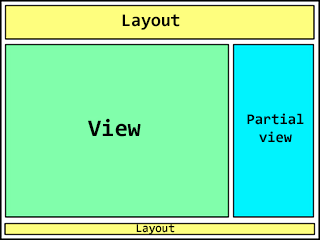
<style>
.page{position:relative;width:320px;height:240px;background:#81feab}
.page>*{position:absolute;margin:0}
.t1{font:18px "Consolas-Bold";color:#000000}
.t2{font:15px "Consolas-Bold";color:#000000}
.t3{font:24px "Consolas-Bold";color:#000000}
.t4{font:12px "Consolas-Bold";color:#000000}
</style>
<div class="page">
<p class="t1" style="left:122px;top:14px;width:58px;height:16px">Layout</p>
<p class="t2" style="left:247px;top:113px;width:57px;height:30px;text-align:center">Partial view</p>
<p class="t3" style="left:88px;top:118px;width:53px;height:19px">View</p>
<p class="t4" style="left:136px;top:224px;width:39px;height:11px">Layout</p>
</div>
